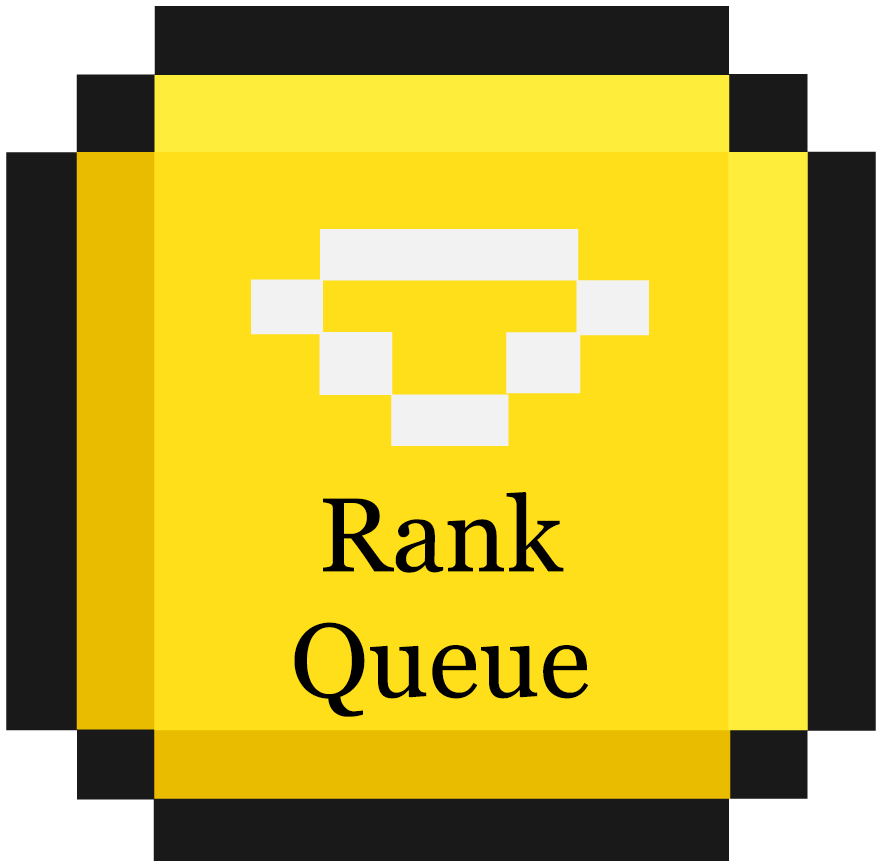
<style>
.page{position:relative;width:882px;height:867px;background:#ffde1a}
.page>*{position:absolute;margin:0}
.t1{font:104.8px "Georgia";color:#000000}
</style>
<div class="page">
<p class="t1" style="left:294px;top:492px;width:295px;height:225px;text-align:center">Rank<br>Queue</p>
</div>
